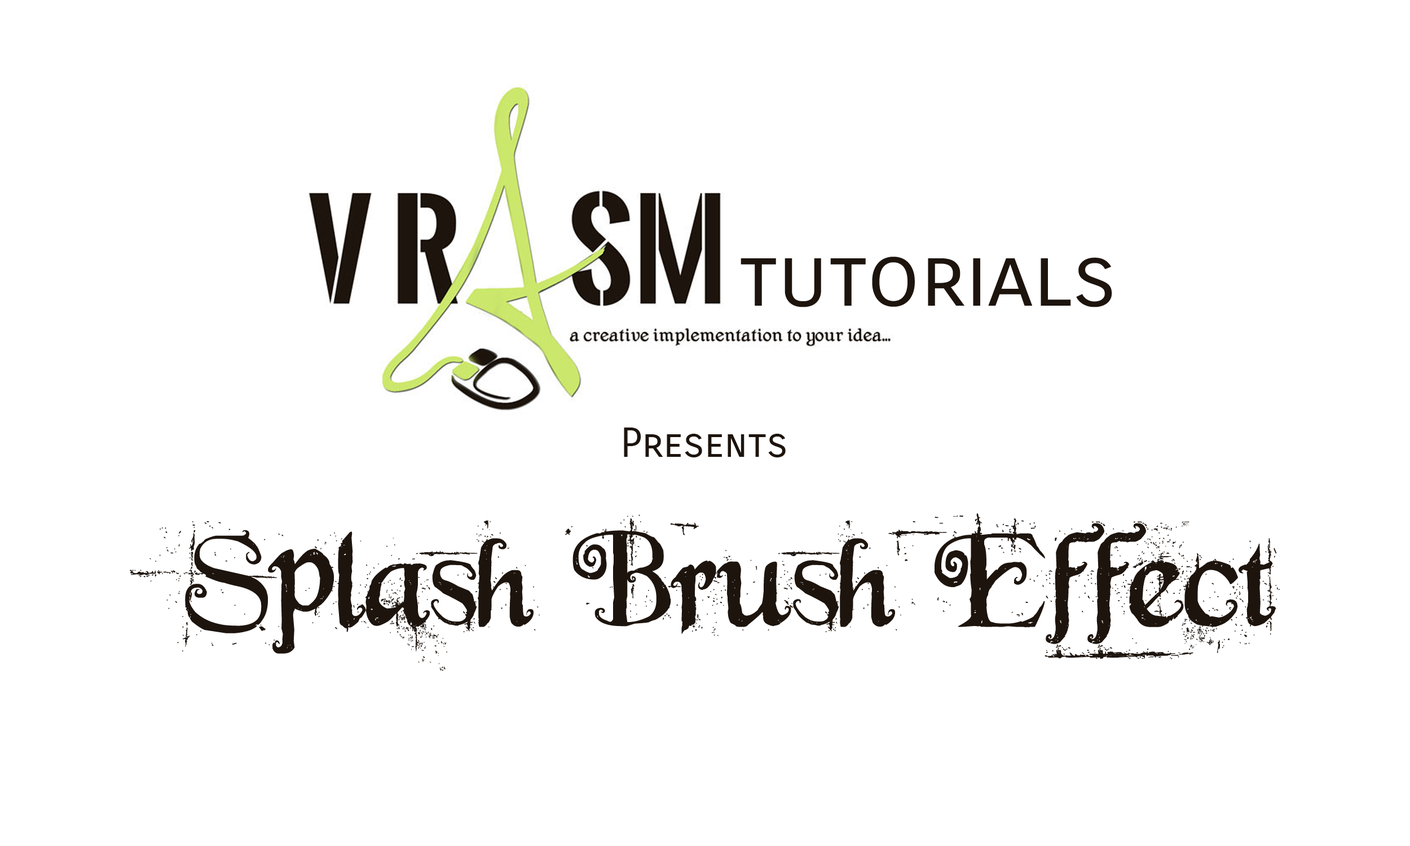
<style>
.page{position:relative;width:1410px;height:846px;background:#ffffff}
.page>*{position:absolute;margin:0}
.t1{font:84.6px "CarroisGothicSC-Regular";color:#1d140d}
.t2{font:40.6px "CarroisGothicSC-Regular";color:#1d140d}
.t3{font:141px "BeyondWonderland";color:#1d140d}
</style>
<div class="page">
<p class="t1" style="left:740px;top:257px;width:372px;height:50px">tutorials</p>
<p class="t2" style="left:624px;top:427px;width:162px;height:30px">Presents</p>
<p class="t3" style="left:130px;top:513px;width:1149px;height:158px">Splash Brush Effect</p>
</div>
